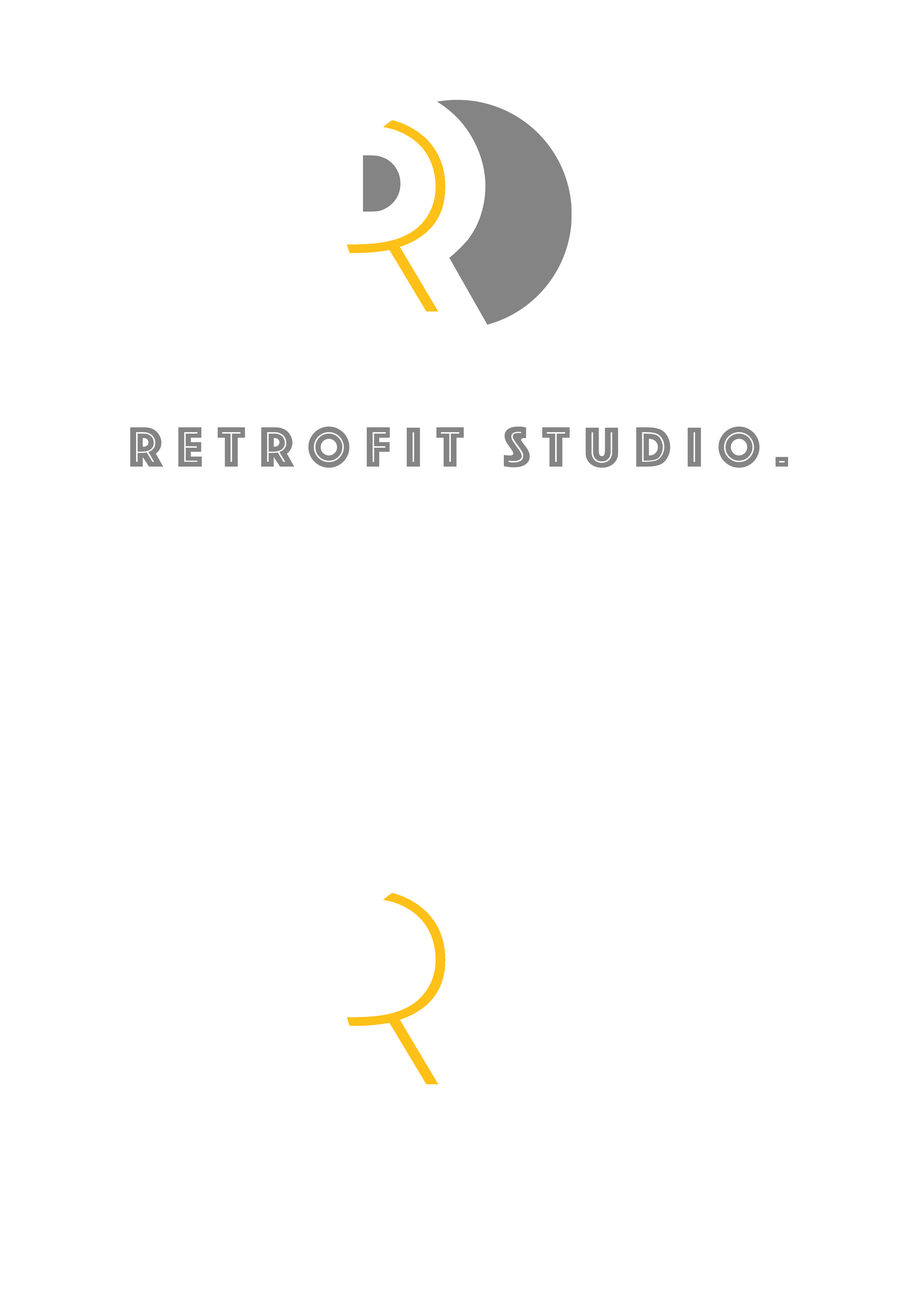
<style>
.page{position:relative;width:918px;height:1299px;background:#ffffff}
.page>*{position:absolute;margin:0}
.t1{font:58.6px "PhosphateInline";letter-spacing:0.24em;color:#848484}
</style>
<div class="page">
<p class="t1" style="left:130px;top:426px;width:659px;height:42px">RETROFIT STUDIO.</p>
</div>
